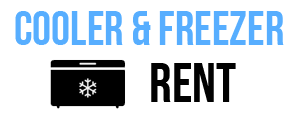
<style>
.page{position:relative;width:300px;height:118px;background:#ffffff}
.page>*{position:absolute;margin:0}
.t1{font:48px "BebasNeue";color:#57aeff}
.t2{font:56px "BebasNeue";color:#010101}
</style>
<div class="page">
<p class="t1" style="left:15px;top:11px;width:269px;height:34px">COOLER &amp; FREEZER</p>
<p class="t2" style="left:151px;top:63px;width:85px;height:39px">RENT</p>
</div>
